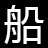
<style>
.page{position:relative;width:48px;height:48px;background:#000000}
.page>*{position:absolute;margin:0}
.t1{font:40px "MicrosoftYaHei";color:#ffffff}
</style>
<div class="page">
<p class="t1" style="left:4px;top:5px;width:40px;height:39px">船</p>
</div>
